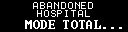
<style>
.page{position:relative;width:128px;height:32px;background:#000000}
.page>*{position:absolute;margin:0}
.t1{font:10px/8px "Terminal";letter-spacing:-0.05em;color:#ffffff}
.t2{font:12px "Terminal";letter-spacing:0.025em;color:#ffffff}
</style>
<div class="page">
<p class="t1" style="left:33px;top:2px;width:60px;height:15px;text-align:center">ABANDONED<br>HOSPITAL</p>
<p class="t2" style="left:25px;top:20px;width:97px;height:9px">MODE TOTAL...</p>
</div>
